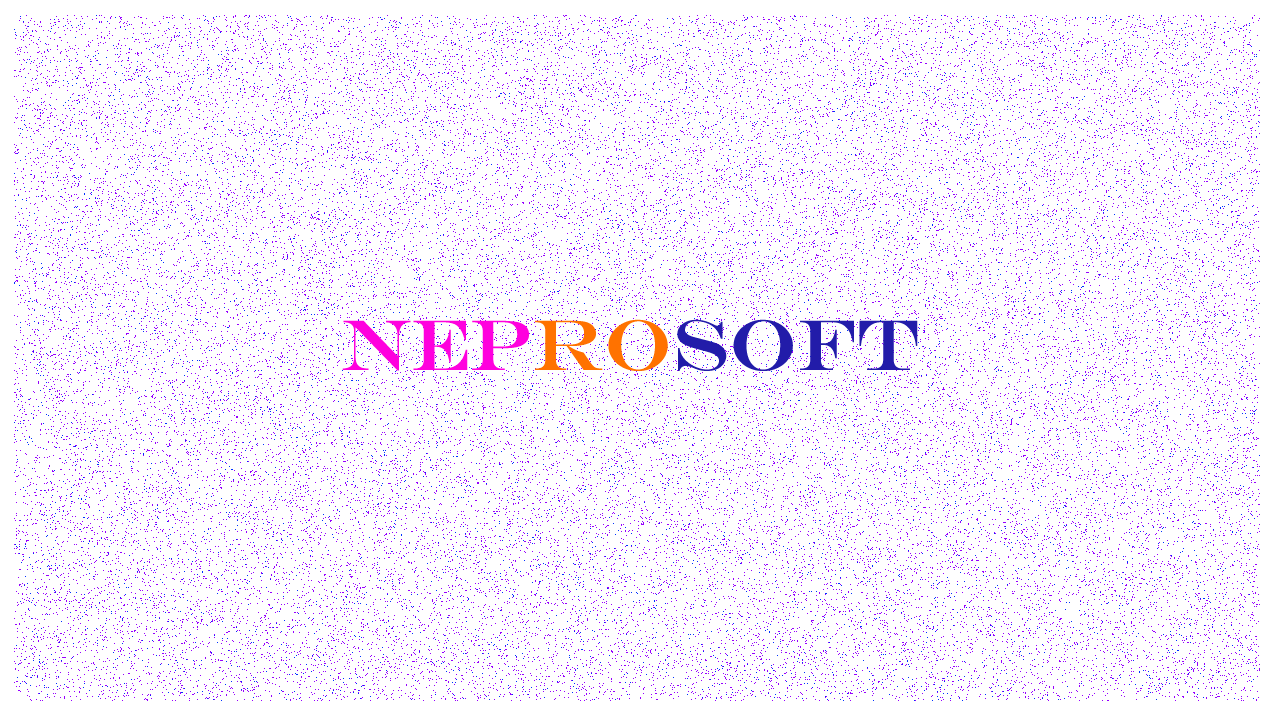
<style>
.page{position:relative;width:1280px;height:720px;background:#ffffff}
.page>*{position:absolute;margin:0}
.t1{font:72px "EngraversMT";color:#221ca9}
.t2{font:72px "EngraversMT";color:#ff00de}
.t3{font:72px "EngraversMT";color:#ff7200}
</style>
<div class="page">
<p class="t1" style="left:342px;top:319px;width:576px;height:52px"><span class="t2">Nep</span><span class="t3">ro</span>Soft</p>
</div>
